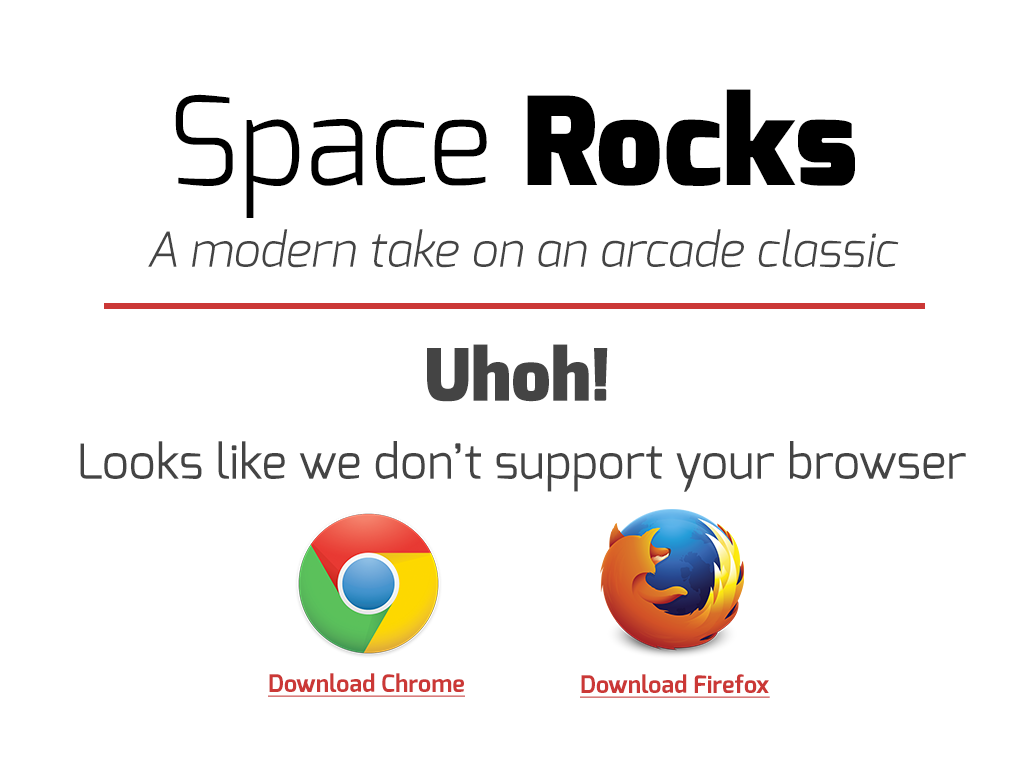
<style>
.page{position:relative;width:1024px;height:768px;background:#ffffff}
.page>*{position:absolute;margin:0}
.t1{font:122px "Exo-Light";color:#000000}
.t2{font:122px "Exo-Black";color:#000000}
.t3{font:48px "Exo-LightItalic";color:#444444}
.t4{font:72px "Exo-Black";color:#444444}
.t5{font:48px "Exo-Regular";color:#444444}
.t6{font:24px "Exo-Bold";color:#cb3836;text-decoration:underline}
</style>
<div class="page">
<p class="t1" style="left:175px;top:89px;width:680px;height:129px">Space<span class="t2"> Rocks</span></p>
<p class="t3" style="left:148px;top:229px;width:751px;height:39px">A modern take on an arcade classic</p>
<p class="t4" style="left:427px;top:344px;width:181px;height:58px">Uhoh!</p>
<p class="t5" style="left:80px;top:441px;width:886px;height:51px">Looks like we don’t support your browser</p>
<p class="t6" style="left:268px;top:673px;width:197px;height:24px">Download Chrome</p>
<p class="t6" style="left:580px;top:674px;width:190px;height:24px">Download Firefox</p>
</div>
